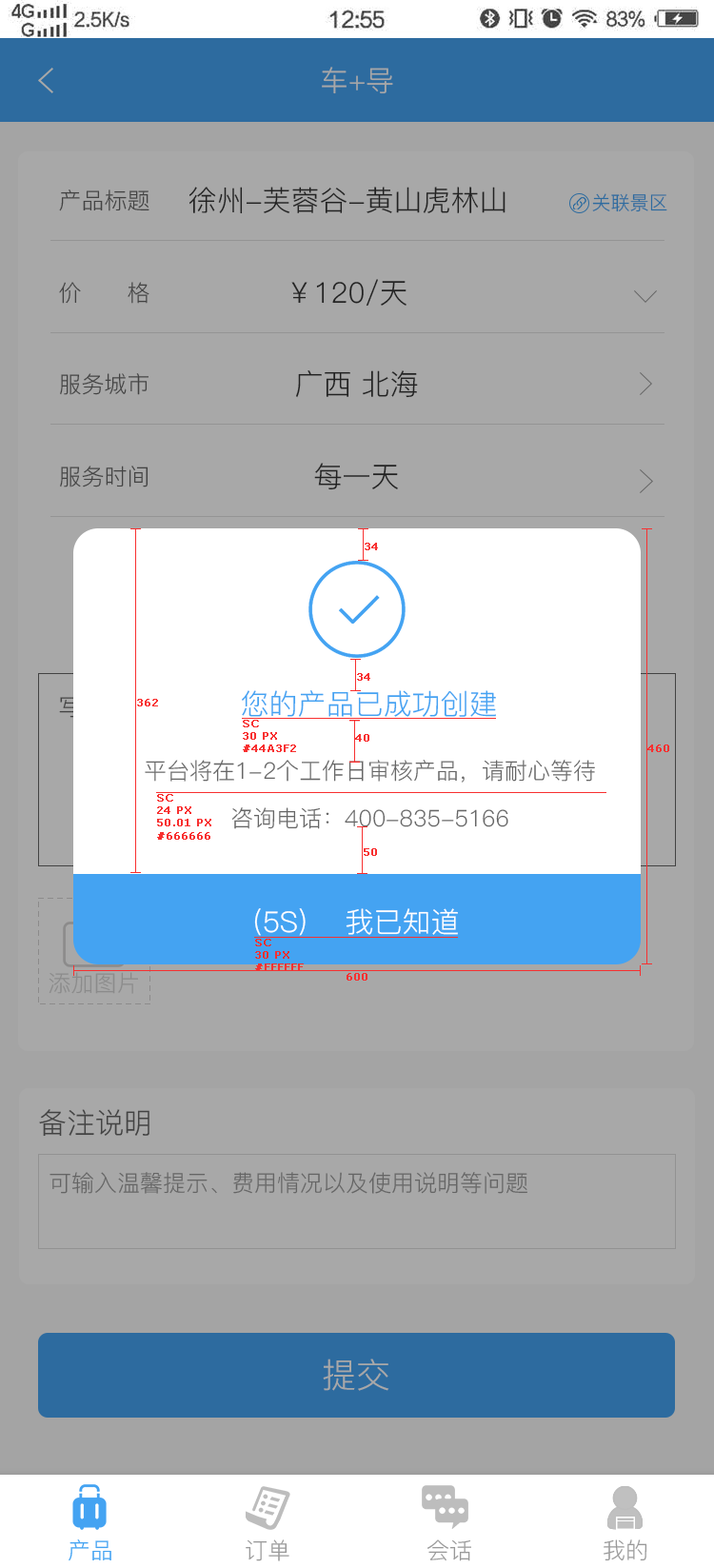
<style>
.page{position:relative;width:714px;height:1568px;background:#a8a8a8}
.page>*{position:absolute;margin:0}
.t1{font:28.6px "PingFang-SC-Regular";color:#a8a8a8;text-transform:uppercase}
.t2{font:22.8px "PingFang-SC-Regular";color:#434343;text-transform:uppercase}
.t3{font:28.6px "PingFang-SC-Regular";color:#333333;text-transform:uppercase}
.t4{font:19px "PingFang-SC-Regular";color:#2d6b9f;text-transform:uppercase}
.t5{font:10.5px "Verdana";color:#f83030;font-weight:bold}
.t6{font:28.6px "PingFang-SC-Regular";color:#44a3f2;text-transform:uppercase}
.t7{font:22.8px/47.6px "PingFang-SC-Regular";color:#666666;text-transform:uppercase}
.t8{font:28.6px "PingFang-SC-Regular";color:#ffffff;text-transform:uppercase}
.t9{font:22.8px "PingFang-SC-Regular";color:#8b8b8b;text-transform:uppercase}
.t10{font:28.6px "PingFang-SC-Regular";color:#434343;text-transform:uppercase}
.t11{font:22.8px "PingFang-SC-Regular";color:#656565;text-transform:uppercase}
.t12{font:34.3px "PingFang-SC-Regular";color:#a8a8a8;text-transform:uppercase}
.t13{font:22.8px "PingFang-SC-Regular";color:#44a3f2;text-transform:uppercase}
.t14{font:22.8px "PingFang-SC-Regular";color:#999999;text-transform:uppercase}
</style>
<div class="page">
<p class="t1" style="left:322px;top:67px;width:71px;height:27px">车+导</p>
<p class="t2" style="left:59px;top:189px;width:90px;height:22px">产品标题</p>
<p class="t3" style="left:189px;top:187px;width:317px;height:27px">徐州-芙蓉谷-黄山虎林山</p>
<p class="t4" style="left:592px;top:193px;width:75px;height:19px">关联景区</p>
<p class="t2" style="left:59px;top:282px;width:90px;height:22px">价      格</p>
<p class="t3" style="left:291px;top:279px;width:116px;height:28px">￥120/天</p>
<p class="t2" style="left:60px;top:373px;width:89px;height:22px">服务城市</p>
<p class="t3" style="left:296px;top:370px;width:122px;height:28px">广西 北海</p>
<p class="t2" style="left:60px;top:466px;width:89px;height:21px">服务时间</p>
<p class="t3" style="left:314px;top:463px;width:84px;height:27px">每一天</p>
<p class="t5" style="left:365px;top:543px;width:13px;height:7px">34</p>
<p class="t5" style="left:357px;top:673px;width:13px;height:8px">34</p>
<p class="t5" style="left:137px;top:699px;width:21px;height:7px">362</p>
<p class="t6" style="left:242px;top:690px;width:254px;height:27px">您的产品已成功创建</p>
<p class="t5" style="left:243px;top:720px;width:53px;height:32px">SC<br>30 PX<br>#44A3F2</p>
<p class="t5" style="left:355px;top:734px;width:14px;height:8px">40</p>
<p class="t5" style="left:647px;top:744px;width:22px;height:8px">460</p>
<p class="t7" style="left:145px;top:760px;width:450px;height:69px;text-align:center">平台将在1-2个工作日审核产品，请耐心等待<br>咨询电话：400-835-5166</p>
<p class="t5" style="left:157px;top:794px;width:54px;height:46px">SC<br>24 PX<br>50.01 PX<br>#666666</p>
<p class="t5" style="left:364px;top:848px;width:13px;height:8px">50</p>
<p class="t8" style="left:254px;top:908px;width:204px;height:28px">(5S)    我已知道</p>
<p class="t5" style="left:255px;top:939px;width:49px;height:32px">SC<br>30 PX<br>#FFFFFF</p>
<p class="t9" style="left:49px;top:972px;width:89px;height:22px">添加图片</p>
<p class="t5" style="left:347px;top:973px;width:20px;height:8px">600</p>
<p class="t10" style="left:39px;top:1109px;width:110px;height:28px">备注说明</p>
<p class="t11" style="left:50px;top:1172px;width:477px;height:22px">可输入温馨提示、费用情况以及使用说明等问题</p>
<p class="t12" style="left:323px;top:1359px;width:66px;height:32px">提交</p>
<p class="t13" style="left:69px;top:1539px;width:42px;height:22px">产品</p>
<p class="t14" style="left:246px;top:1539px;width:43px;height:22px">订单</p>
<p class="t14" style="left:427px;top:1539px;width:44px;height:22px">会话</p>
<p class="t14" style="left:604px;top:1539px;width:43px;height:22px">我的</p>
</div>
